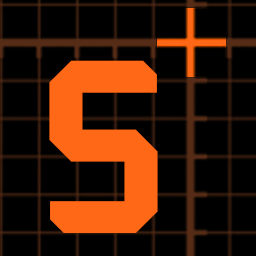
<style>
.page{position:relative;width:256px;height:256px;background:#000000}
.page>*{position:absolute;margin:0}
.t1{font:269.5px "Bombardier";color:#ff6817}
</style>
<div class="page">
<p class="t1" style="left:49px;top:60px;width:109px;height:173px">S</p>
</div>
